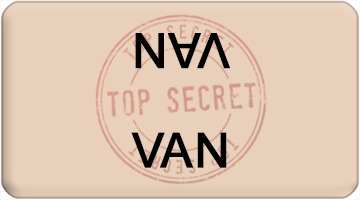
<style>
.page{position:relative;width:360px;height:200px;background:#e8d0bb}
.page>*{position:absolute;margin:0}
.t1{font:48px "ArialMT";color:#000000;font-weight:bold}
</style>
<div class="page">
<p class="t1" style="left:135px;top:33px;width:95px;height:36px;rotate:180deg">VAN</p>
<p class="t1" style="left:131px;top:132px;width:96px;height:36px">VAN</p>
</div>
